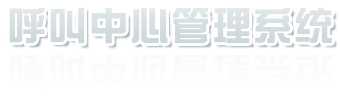
<style>
.page{position:relative;width:340px;height:98px;background:#ffffff}
.page>*{position:absolute;margin:0}
.t1{font:39px "DFZongYi-Bd-80-Win-GB";letter-spacing:0.05em;color:#d5dee1}
</style>
<div class="page">
<p class="t1" style="left:9px;top:7px;width:323px;height:37px">呼叫中心管理系统</p>
</div>
